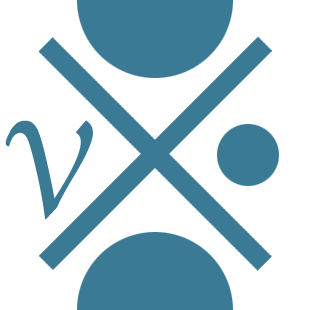
<style>
.page{position:relative;width:310px;height:310px;background:#ffffff}
.page>*{position:absolute;margin:0}
.t1{font:140px "Apple-Chancery";color:#3b7a95;text-transform:uppercase;font-weight:bold;scale:0.92 1}
</style>
<div class="page">
<p class="t1" style="left:5px;top:120px;width:88px;height:100px">V</p>
</div>
